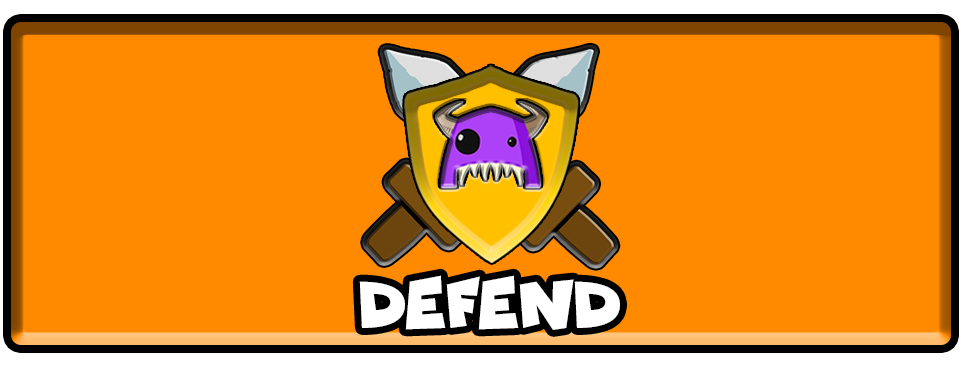
<style>
.page{position:relative;width:961px;height:367px;background:#ff8a00}
.page>*{position:absolute;margin:0}
.t1{font:67.6px "Funhouse";color:#ffffff}
</style>
<div class="page">
<p class="t1" style="left:359px;top:275px;width:261px;height:55px">DEFEND</p>
</div>
